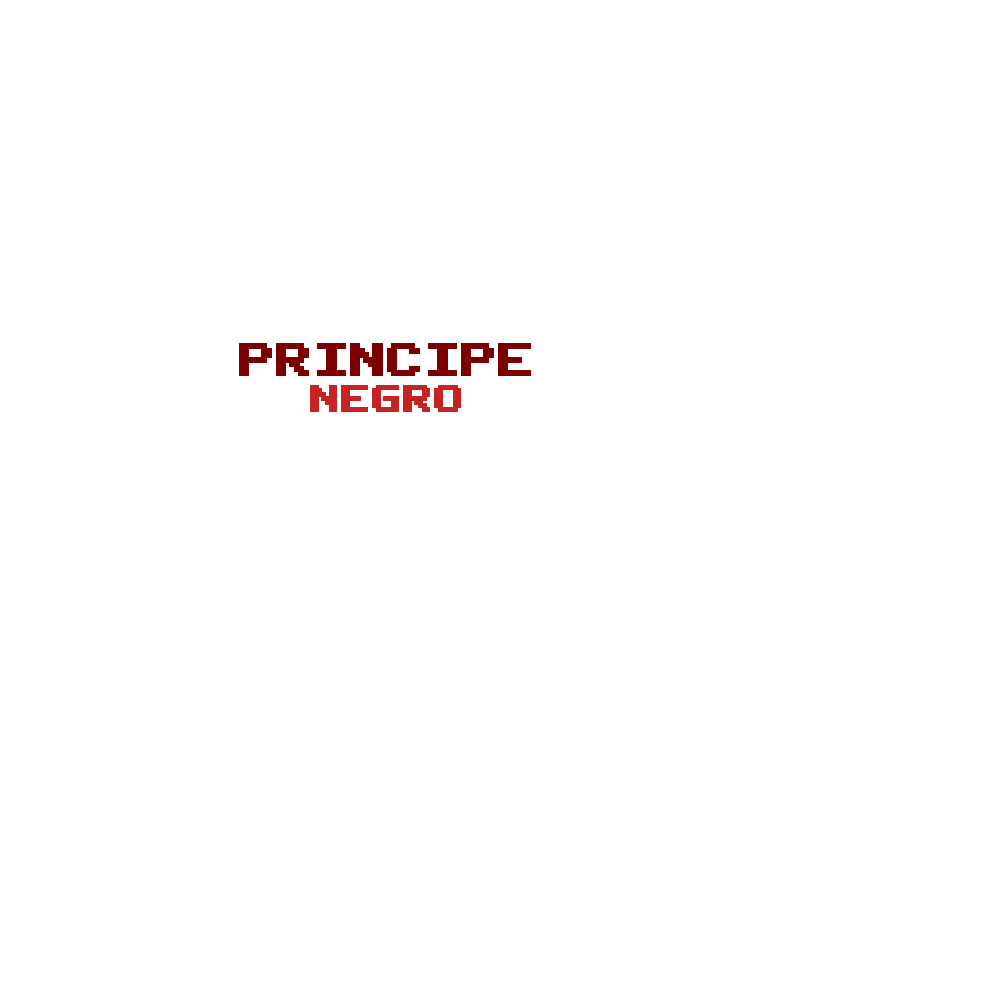
<style>
.page{position:relative;width:1000px;height:1000px;background:#ffffff}
.page>*{position:absolute;margin:0}
.t1{font:36px "PublicPixel";color:#7c0000;font-weight:bold}
.t2{font:30px "PublicPixel";color:#c62424;font-weight:bold}
</style>
<div class="page">
<p class="t1" style="left:239px;top:343px;width:292px;height:69px;text-align:center">PRINCIPE<br><span class="t2"> NEGRO</span></p>
</div>
